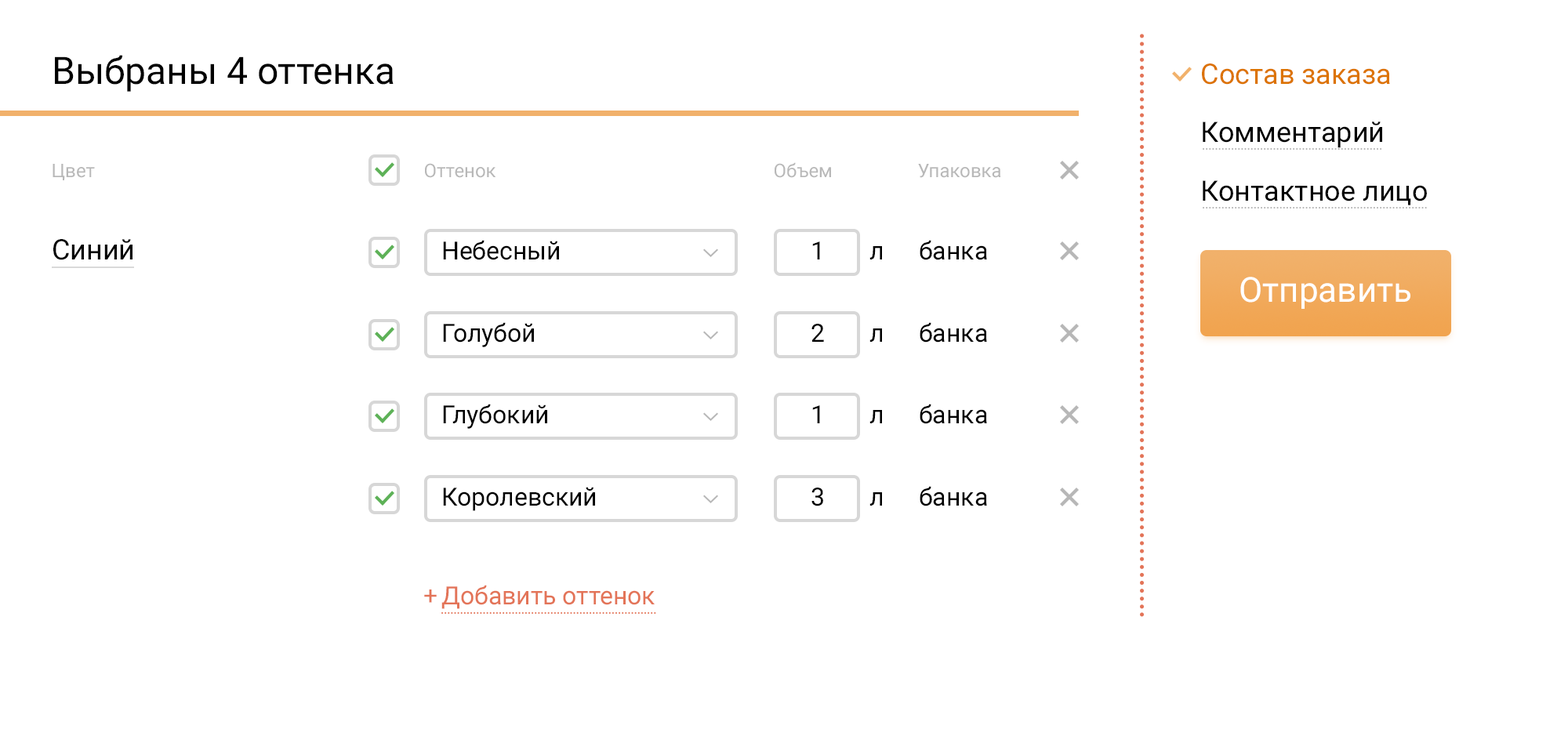
<style>
.page{position:relative;width:1568px;height:729px;background:#ffffff}
.page>*{position:absolute;margin:0}
.t1{font:37.6px "Roboto-Regular";color:#000000}
.t2{font:28.2px "Roboto-Regular";color:#dc7300}
.t3{font:28.2px "Roboto-Regular";color:#000000}
.t4{font:18.8px "Roboto-Regular";color:#b8b8b8}
.t5{font:25.1px "Roboto-Regular";color:#000000}
.t6{font:34.5px "Roboto-Regular";color:#ffffff}
.t7{font:25.1px "Roboto-Regular";color:#e37458}
</style>
<div class="page">
<p class="t1" style="left:55px;top:55px;width:339px;height:37px">Выбраны 4 оттенка</p>
<p class="t2" style="left:1202px;top:64px;width:188px;height:21px">Состав заказа</p>
<p class="t3" style="left:1203px;top:122px;width:179px;height:26px">Комментарий</p>
<p class="t4" style="left:53px;top:164px;width:42px;height:16px">Цвет</p>
<p class="t4" style="left:425px;top:163px;width:71px;height:15px">Оттенок</p>
<p class="t4" style="left:775px;top:162px;width:56px;height:16px">Объем</p>
<p class="t4" style="left:918px;top:164px;width:83px;height:14px">Упаковка</p>
<p class="t3" style="left:1203px;top:180px;width:224px;height:25px">Контактное лицо</p>
<p class="t3" style="left:53px;top:239px;width:79px;height:21px">Синий</p>
<p class="t5" style="left:443px;top:240px;width:116px;height:20px">Небесный</p>
<p class="t5" style="left:812px;top:241px;width:8px;height:19px">1</p>
<p class="t5" style="left:920px;top:240px;width:67px;height:20px">банка</p>
<p class="t5" style="left:869px;top:246px;width:13px;height:14px">л</p>
<p class="t6" style="left:1240px;top:277px;width:170px;height:32px">Отправить</p>
<p class="t5" style="left:443px;top:322px;width:91px;height:25px">Голубой</p>
<p class="t5" style="left:811px;top:324px;width:13px;height:18px">2</p>
<p class="t5" style="left:869px;top:328px;width:13px;height:14px">л</p>
<p class="t5" style="left:920px;top:322px;width:67px;height:21px">банка</p>
<p class="t5" style="left:443px;top:404px;width:104px;height:25px">Глубокий</p>
<p class="t5" style="left:812px;top:405px;width:8px;height:18px">1</p>
<p class="t5" style="left:869px;top:410px;width:13px;height:13px">л</p>
<p class="t5" style="left:920px;top:404px;width:67px;height:20px">банка</p>
<p class="t5" style="left:443px;top:487px;width:152px;height:24px">Королевский</p>
<p class="t5" style="left:811px;top:488px;width:12px;height:18px">3</p>
<p class="t5" style="left:869px;top:492px;width:13px;height:14px">л</p>
<p class="t5" style="left:920px;top:486px;width:67px;height:20px">банка</p>
<p class="t7" style="left:424px;top:585px;width:231px;height:24px">+ Добавить оттенок</p>
</div>
